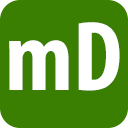
<style>
.page{position:relative;width:128px;height:128px;background:#3a7f02}
.page>*{position:absolute;margin:0}
.t1{font:100px "MyriadPro-BoldCond";color:#ffffff}
</style>
<div class="page">
<p class="t1" style="left:9px;top:22px;width:111px;height:69px">mD</p>
</div>
